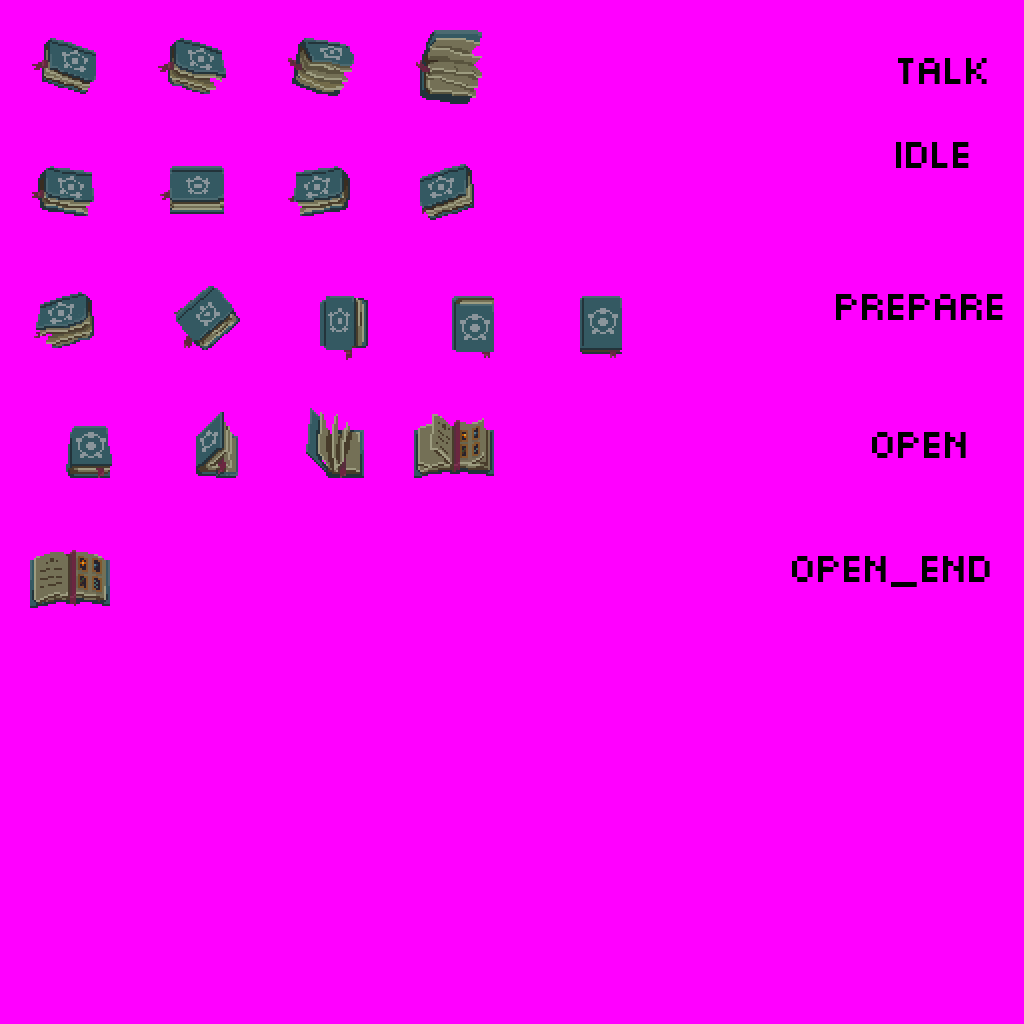
<style>
.page{position:relative;width:1024px;height:1024px;background:#ff00ff}
.page>*{position:absolute;margin:0}
.t1{font:53.3px "MunroSmall";color:#000000}
</style>
<div class="page">
<p class="t1" style="left:898px;top:58px;width:89px;height:26px">talk</p>
<p class="t1" style="left:896px;top:142px;width:73px;height:26px">idle</p>
<p class="t1" style="left:836px;top:294px;width:167px;height:26px">prepare</p>
<p class="t1" style="left:872px;top:432px;width:94px;height:26px">open</p>
<p class="t1" style="left:792px;top:556px;width:198px;height:31px">open_end</p>
</div>
